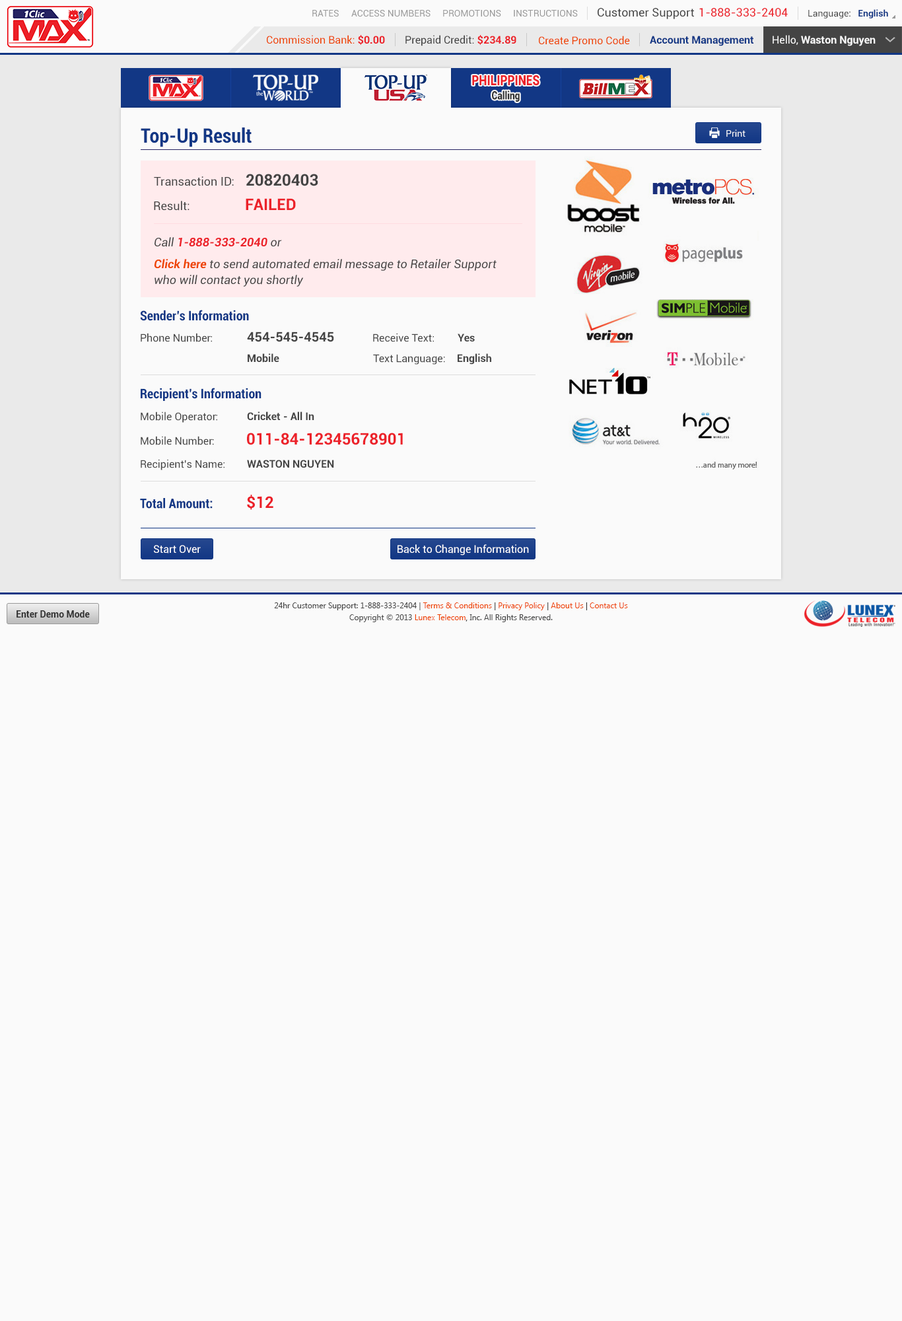
<style>
.page{position:relative;width:902px;height:1321px;background:#fafafa}
.page>*{position:absolute;margin:0}
.t1{font:9.2px "Roboto-Regular";color:#999999}
.t2{font:11.6px "Roboto-Regular";color:#444444}
.t3{font:11.6px "Roboto-Regular";color:#ec2029}
.t4{font:9.2px "Roboto-Regular";color:#444444}
.t5{font:9.2px "Roboto-Bold";color:#123785}
.t6{font:10.6px "Roboto-Regular";color:#ee4400}
.t7{font:10.6px "Roboto-Bold";color:#ec2028}
.t8{font:10.6px "Roboto-Regular";color:#444444}
.t9{font:10.6px "Roboto-Bold";color:#123785}
.t10{font:10.6px "Roboto-Bold";color:#fafafa}
.t11{font:10.6px "Roboto-Regular";color:#fafafa}
.t12{font:14.1px "Roboto-Black";color:#ec2028;scale:0.81 1}
.t13{font:11.3px "Roboto-Black";color:#333333;scale:0.81 1}
.t14{font:19.8px "Roboto-BoldCondensed";color:#123785}
.t15{font:9.2px "Roboto-Regular";color:#fafafa}
.t16{font:15.9px "Roboto-Bold";color:#444444}
.t17{font:11.9px "Roboto-Regular";color:#444444}
.t18{font:15.9px "Roboto-Bold";color:#ec222a}
.t19{font:11.9px "Roboto-BoldItalic";color:#ec222a}
.t20{font:11.9px "Roboto-Italic";color:#444444}
.t21{font:11.9px/15.9px "Roboto-Italic";color:#444444}
.t22{font:11.9px/15.9px "Roboto-BoldItalic";color:#ee4400}
.t23{font:13.2px "Roboto-BoldCondensed";color:#123785}
.t24{font:13.2px "Roboto-Bold";color:#444444}
.t25{font:10.6px "Roboto-Bold";color:#444444}
.t26{font:15.9px "Roboto-Bold";color:#eb1e27}
.t27{font:10.6px "Roboto-Regular";color:#ffffff}
.t28{font:7.9px/11.9px "SegoeUI";color:#444444}
.t29{font:7.9px/11.9px "SegoeUI";color:#ee4400}
.t30{font:7.9px/11.9px "SegoeUI";color:#333333}
.t31{font:9.2px "Roboto-Bold";color:#333333}
</style>
<div class="page">
<p class="t1" style="left:312px;top:10px;width:27px;height:7px">RATES</p>
<p class="t1" style="left:351px;top:10px;width:80px;height:7px">ACCESS NUMBERS</p>
<p class="t1" style="left:443px;top:10px;width:58px;height:7px">PROMOTIONS</p>
<p class="t1" style="left:514px;top:10px;width:64px;height:7px">INSTRUCTIONS</p>
<p class="t2" style="left:598px;top:8px;width:96px;height:11px">Customer Support</p>
<p class="t3" style="left:700px;top:8px;width:88px;height:9px">1-888-333-2404</p>
<p class="t4" style="left:809px;top:9px;width:80px;height:9px">Language:   <span class="t5">English</span></p>
<p class="t6" style="left:267px;top:35px;width:118px;height:10px">Commission Bank: <span class="t7">$0.00</span></p>
<p class="t8" style="left:406px;top:35px;width:111px;height:11px">Prepaid Credit: <span class="t7">$234.89</span></p>
<p class="t6" style="left:539px;top:36px;width:91px;height:9px">Create Promo Code</p>
<p class="t9" style="left:650px;top:36px;width:104px;height:10px">Account Management</p>
<p class="t10" style="left:773px;top:35px;width:103px;height:11px"><span class="t11">Hello, </span>Waston Nguyen</p>
<p class="t12" style="left:472px;top:75px;width:68px;height:11px">PHILIPPINES</p>
<p class="t13" style="left:492px;top:91px;width:28px;height:11px">Calling</p>
<p class="t14" style="left:141px;top:128px;width:111px;height:19px">Top-Up Result</p>
<p class="t15" style="left:727px;top:129px;width:19px;height:8px">Print</p>
<p class="t16" style="left:246px;top:174px;width:72px;height:12px">20820403</p>
<p class="t17" style="left:154px;top:176px;width:80px;height:10px">Transaction ID:</p>
<p class="t17" style="left:154px;top:201px;width:36px;height:10px">Result:</p>
<p class="t18" style="left:246px;top:198px;width:50px;height:12px">FAILED</p>
<p class="t19" style="left:155px;top:237px;width:127px;height:10px"><span class="t20">Call </span>1-888-333-2040<span class="t20"> or</span></p>
<p class="t21" style="left:154px;top:259px;width:343px;height:28px"><span class="t22">Click here</span> to send automated email message to Retailer Support<br>who will contact you shortly</p>
<p class="t23" style="left:140px;top:310px;width:109px;height:11px">Sender’s Information</p>
<p class="t8" style="left:141px;top:333px;width:71px;height:9px">Phone Number:</p>
<p class="t24" style="left:247px;top:332px;width:87px;height:10px">454-545-4545</p>
<p class="t8" style="left:373px;top:333px;width:61px;height:9px">Receive Text:</p>
<p class="t25" style="left:458px;top:334px;width:17px;height:8px">Yes</p>
<p class="t25" style="left:248px;top:353px;width:31px;height:10px">Mobile</p>
<p class="t25" style="left:458px;top:353px;width:34px;height:12px">English</p>
<p class="t8" style="left:373px;top:354px;width:72px;height:11px">Text Language:</p>
<p class="t23" style="left:141px;top:388px;width:121px;height:13px">Recipient’s Information</p>
<p class="t8" style="left:141px;top:412px;width:76px;height:11px">Mobile Operator:</p>
<p class="t25" style="left:247px;top:412px;width:67px;height:8px">Cricket - All In</p>
<p class="t8" style="left:141px;top:436px;width:73px;height:9px">Mobile Number:</p>
<p class="t18" style="left:247px;top:433px;width:156px;height:12px">011-84-12345678901</p>
<p class="t8" style="left:141px;top:459px;width:84px;height:11px">Recipient’s Name:</p>
<p class="t25" style="left:247px;top:460px;width:87px;height:8px">WASTON NGUYEN</p>
<p class="t26" style="left:247px;top:495px;width:27px;height:15px">$12</p>
<p class="t23" style="left:140px;top:498px;width:73px;height:11px">Total Amount:</p>
<p class="t27" style="left:154px;top:545px;width:47px;height:9px">Start Over</p>
<p class="t27" style="left:398px;top:544px;width:131px;height:12px">Back to Change Information</p>
<p class="t28" style="left:274px;top:603px;width:354px;height:19px;text-align:center">24hr Customer Support: 1-888-333-2404 | <span class="t29">Terms &amp; Conditions</span><span class="t30"> | </span><span class="t29">Privacy Policy</span><span class="t30"> | </span><span class="t29">About Us</span><span class="t30"> | </span><span class="t29">Contact Us<br></span>Copyright © 2013 <span class="t29">Lunex Telecom</span><span class="t30">,</span> Inc. All Rights Reserved.</p>
<p class="t31" style="left:17px;top:610px;width:73px;height:8px">Enter Demo Mode</p>
</div>
